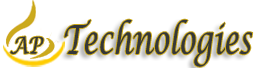
<style>
.page{position:relative;width:261px;height:68px;background:#ffffff}
.page>*{position:absolute;margin:0}
.t1{font:39.5px "LucidaCalligraphy-Italic";color:#353738;scale:0.72 1}
.t2{font:22.9px "LucidaCalligraphy-Italic";color:#353738;scale:0.82 1}
</style>
<div class="page">
<p class="t1" style="left:64px;top:19px;width:189px;height:48px">Technologies</p>
<p class="t2" style="left:10px;top:36px;width:34px;height:18px">AP</p>
</div>
